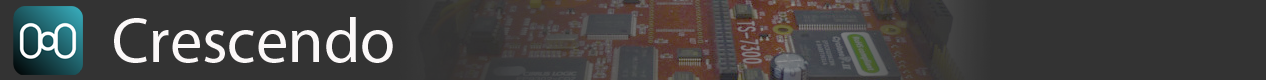
<style>
.page{position:relative;width:1266px;height:80px;background:#333333}
.page>*{position:absolute;margin:0}
.t1{font:64px "MyriadPro-Regular";color:#fbf8f8}
</style>
<div class="page">
<p class="t1" style="left:114px;top:17px;width:279px;height:46px">Crescendo</p>
</div>
